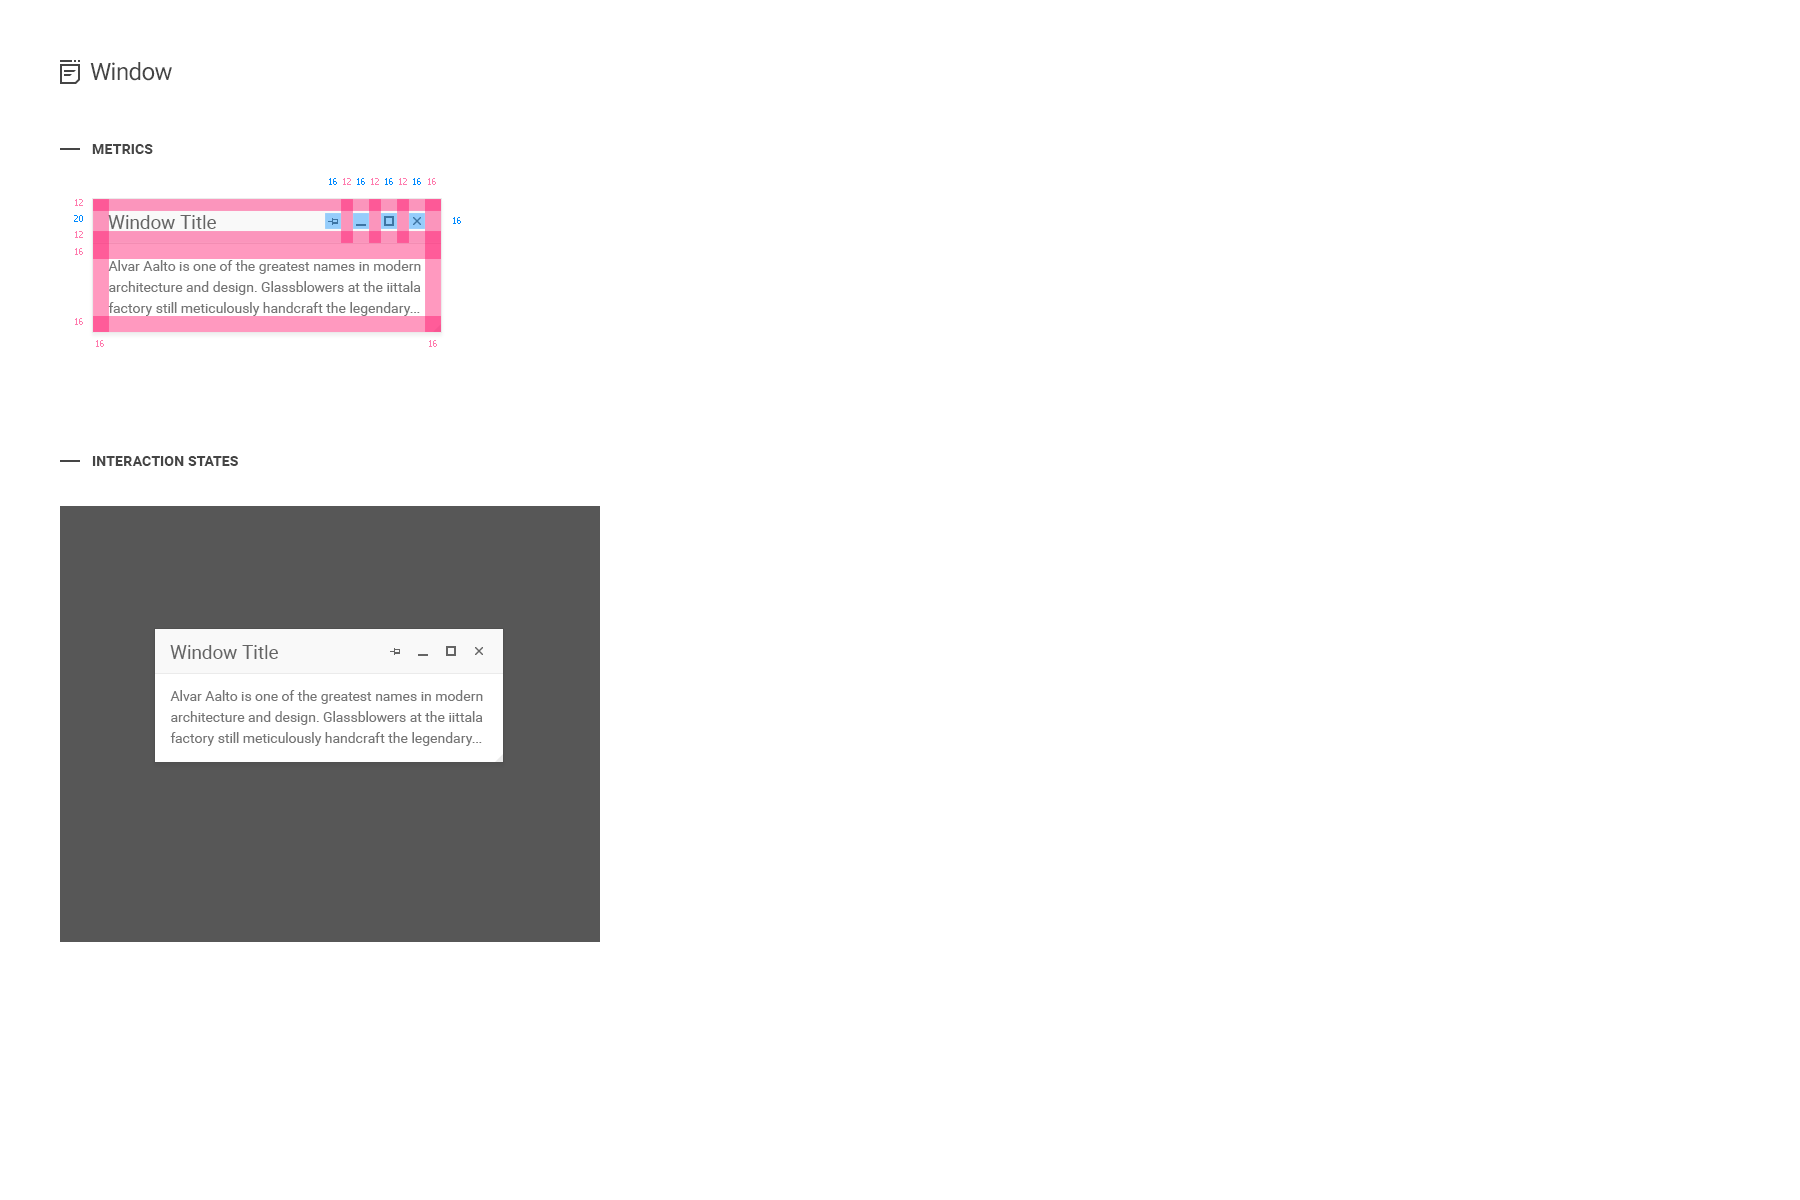
<style>
.page{position:relative;width:1800px;height:1200px;background:#ffffff}
.page>*{position:absolute;margin:0}
.t1{font:24px "Roboto-Regular";letter-spacing:-0.025em;color:#454545}
.t2{font:14px "Roboto-Bold";letter-spacing:0.01em;color:#454545;text-transform:uppercase}
.t3{font:9px "Tahoma";color:#008aff}
.t4{font:9px "Tahoma";color:#ff7cae}
.t5{font:19px "Roboto-Regular";color:#656565}
.t6{font:14px/21px "Roboto-Regular";color:#757575}
</style>
<div class="page">
<p class="t1" style="left:90px;top:62px;width:82px;height:19px">Window</p>
<p class="t2" style="left:92px;top:144px;width:61px;height:10px">Metrics</p>
<p class="t3" style="left:329px;top:178px;width:8px;height:7px">16</p>
<p class="t4" style="left:343px;top:178px;width:8px;height:7px">12</p>
<p class="t3" style="left:357px;top:178px;width:8px;height:7px">16</p>
<p class="t4" style="left:371px;top:178px;width:8px;height:7px">12</p>
<p class="t3" style="left:385px;top:178px;width:8px;height:7px">16</p>
<p class="t4" style="left:399px;top:178px;width:8px;height:7px">12</p>
<p class="t3" style="left:413px;top:178px;width:8px;height:7px">16</p>
<p class="t4" style="left:428px;top:178px;width:8px;height:7px">16</p>
<p class="t4" style="left:75px;top:199px;width:8px;height:7px">12</p>
<p class="t3" style="left:74px;top:215px;width:9px;height:7px">20</p>
<p class="t5" style="left:108px;top:215px;width:108px;height:14px">Window Title</p>
<p class="t3" style="left:453px;top:217px;width:8px;height:7px">16</p>
<p class="t4" style="left:75px;top:231px;width:8px;height:7px">12</p>
<p class="t4" style="left:75px;top:248px;width:8px;height:7px">16</p>
<p class="t6" style="left:108px;top:260px;width:313px;height:56px">Alvar Aalto is one of the greatest names in modern architecture and design. Glassblowers at the iittala factory still meticulously handcraft the legendary...</p>
<p class="t4" style="left:75px;top:318px;width:8px;height:7px">16</p>
<p class="t4" style="left:96px;top:340px;width:8px;height:7px">16</p>
<p class="t4" style="left:429px;top:340px;width:8px;height:7px">16</p>
<p class="t2" style="left:92px;top:456px;width:146px;height:10px">Interaction states</p>
<p class="t5" style="left:170px;top:645px;width:108px;height:14px">Window Title</p>
<p class="t6" style="left:170px;top:690px;width:313px;height:56px">Alvar Aalto is one of the greatest names in modern architecture and design. Glassblowers at the iittala factory still meticulously handcraft the legendary...</p>
</div>
